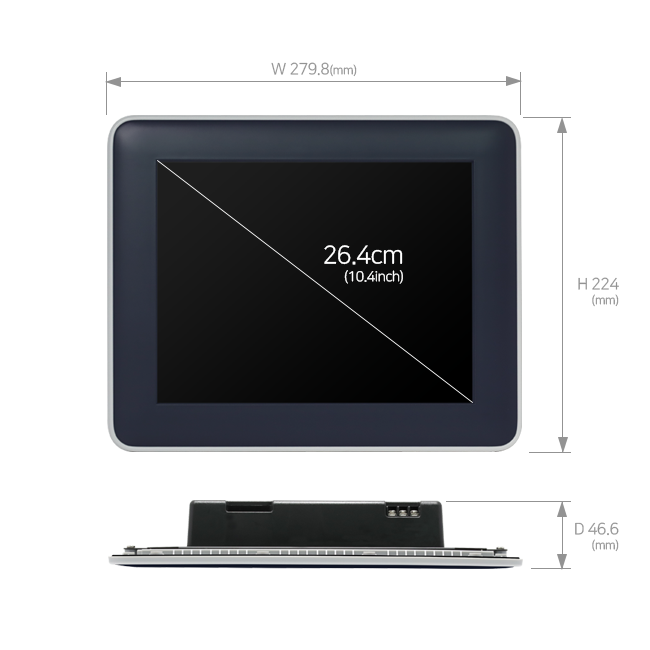
<style>
.page{position:relative;width:650px;height:650px;background:#ffffff}
.page>*{position:absolute;margin:0}
.t1{font:16px "NanumSquareR";letter-spacing:-0.03em;color:#939393}
.t2{font:12px "NanumSquareR";letter-spacing:-0.03em;color:#939393}
.t3{font:14px/18px "NanumSquareR";letter-spacing:-0.03em;color:#ffffff}
.t4{font:25px/18px "NanumSquareR";letter-spacing:-0.03em;color:#ffffff}
.t5{font:16px/15px "NanumSquareR";letter-spacing:-0.03em;color:#939393}
.t6{font:12px/15px "NanumSquareR";letter-spacing:-0.03em;color:#939393}
</style>
<div class="page">
<p class="t1" style="left:271px;top:62px;width:86px;height:15px">W 279.8<span class="t2">(mm)</span></p>
<p class="t3" style="left:324px;top:245px;width:79px;height:39px;text-align:right"><span class="t4">26.4cm<br></span>(10.4inch)</p>
<p class="t5" style="left:578px;top:277px;width:41px;height:30px;text-align:right">H 224<br><span class="t6">(mm)</span></p>
<p class="t5" style="left:575px;top:522px;width:44px;height:30px;text-align:right">D 46.6<br><span class="t6">(mm)</span></p>
</div>
